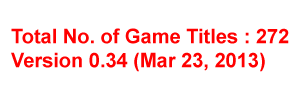
<style>
.page{position:relative;width:300px;height:100px;background:#ffffff}
.page>*{position:absolute;margin:0}
.t1{font:20px "Arial-BoldMT";color:#ff0000}
</style>
<div class="page">
<p class="t1" style="left:11px;top:28px;width:278px;height:44px">Total No. of Game Titles : 272<br>Version 0.34 (Mar 23, 2013)</p>
</div>
